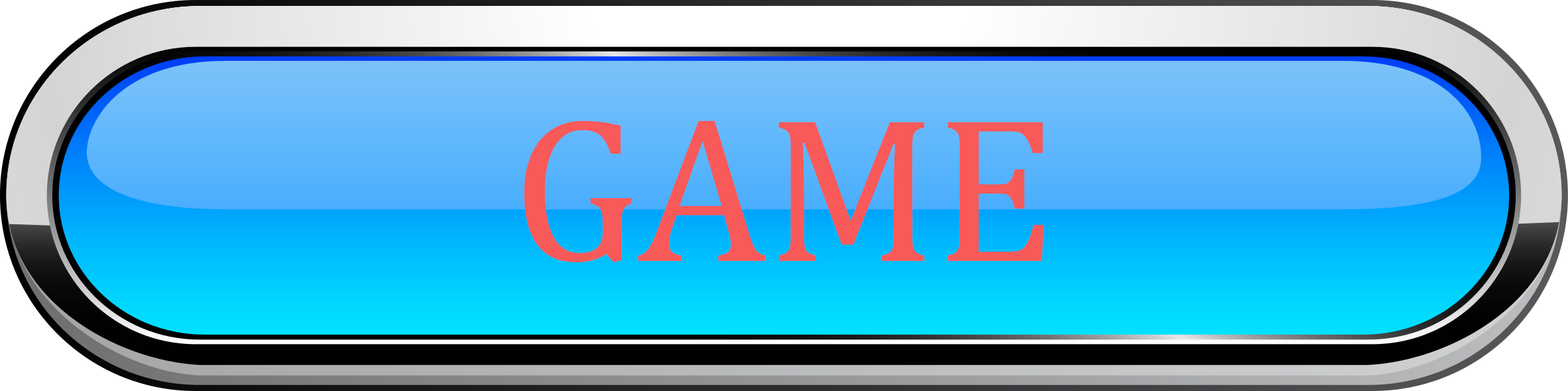
<style>
.page{position:relative;width:1568px;height:391px}
.page>*{position:absolute;margin:0}
.t1{font:207.5px "Cambria";color:#f85959}
</style>
<div class="page">
<p class="t1" style="left:524px;top:121px;width:520px;height:141px">GAME</p>
</div>
